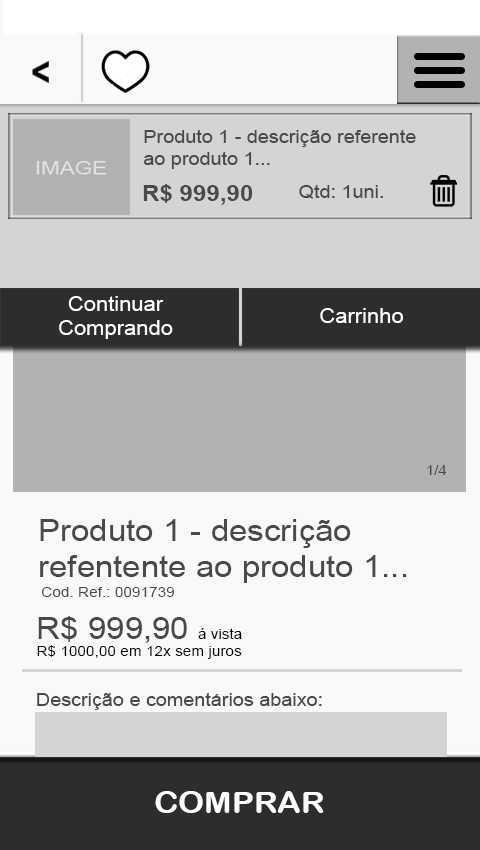
<style>
.page{position:relative;width:480px;height:850px;background:#f9f9f9}
.page>*{position:absolute;margin:0}
.t1{font:18px "ArialMT";color:#494949;scale:1.1 1}
.t2{font:22px "Arial-BoldMT";color:#494949;scale:1.1 1}
.t3{font:20px "ArialMT";color:#ffffff;scale:1.1 1}
.t4{font:14px "ArialMT";color:#494949;scale:1.1 1}
.t5{font:30px "ArialMT";color:#494949;scale:1.1 1}
.t6{font:14px "ArialMT";color:#000000;scale:1.1 1}
.t7{font:30px "ArialRoundedMTBold";color:#ffffff;scale:1.1 1}
</style>
<div class="page">
<p class="t1" style="left:144px;top:129px;width:272px;height:40px">Produto 1 - descrição referente<br>ao produto 1...</p>
<p class="t2" style="left:143px;top:184px;width:110px;height:21px">R$ 999,90</p>
<p class="t1" style="left:299px;top:184px;width:84px;height:15px">Qtd: 1uni.</p>
<p class="t3" style="left:59px;top:296px;width:114px;height:43px;text-align:center">Continuar<br>Comprando</p>
<p class="t3" style="left:320px;top:308px;width:83px;height:15px">Carrinho</p>
<p class="t4" style="left:427px;top:465px;width:20px;height:10px">1/4</p>
<p class="t5" style="left:40px;top:519px;width:367px;height:64px">Produto 1 - descrição<br>refentente ao produto 1...</p>
<p class="t4" style="left:42px;top:587px;width:132px;height:10px">Cod. Ref.: 0091739</p>
<p class="t6" style="left:37px;top:616px;width:205px;height:43px"><span class="t5">R$ 999,90 </span>á vista<br>R$ 1000,00 em 12x sem juros</p>
<p class="t1" style="left:37px;top:692px;width:285px;height:18px">Descrição e comentários abaixo:</p>
<p class="t7" style="left:155px;top:791px;width:169px;height:22px">COMPRAR</p>
</div>
